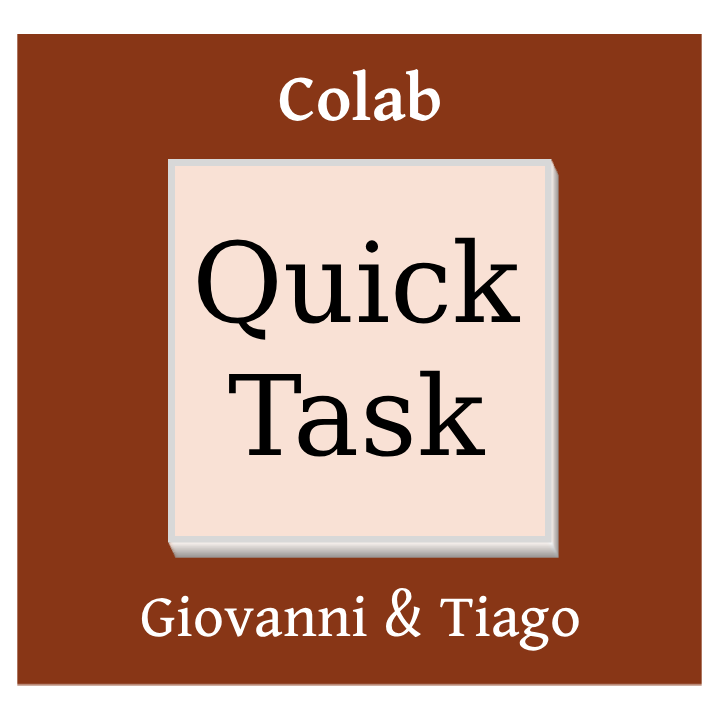
<style>
.page{position:relative;width:720px;height:720px;background:#883616}
.page>*{position:absolute;margin:0}
.t1{font:73.4px "DaiBannaSIL-SemiBold";color:#ffffff}
.t2{font:111px "DejaVuSerif";color:#000000}
.t3{font:65.7px "DaiBannaSIL-Regular";color:#ffffff}
</style>
<div class="page">
<p class="t1" style="left:279px;top:69px;width:161px;height:52px">Colab</p>
<p class="t2" style="left:198px;top:237px;width:323px;height:220px;text-align:center">Quick<br>Task</p>
<p class="t3" style="left:141px;top:587px;width:438px;height:64px">Giovanni &amp; Tiago</p>
</div>
